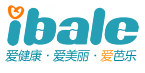
<style>
.page{position:relative;width:145px;height:73px;background:#ffffff}
.page>*{position:absolute;margin:0}
.t1{font:12.8px "FZLTHJW--GB1-0";letter-spacing:-0.05em;color:#00879f;font-style:italic}
.t2{font:12.8px "FZLTHJW--GB1-0";letter-spacing:-0.05em;color:#fc9719;font-style:italic}
</style>
<div class="page">
<p class="t1" style="left:5px;top:49px;width:132px;height:13px">爱健康·爱美丽·<span class="t2">爱</span>芭乐</p>
</div>
